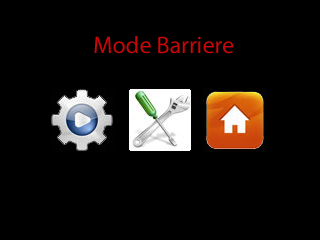
<style>
.page{position:relative;width:320px;height:240px;background:#000000}
.page>*{position:absolute;margin:0}
.t1{font:24px "MyriadPro-Regular";color:#ca0606}
</style>
<div class="page">
<p class="t1" style="left:94px;top:36px;width:140px;height:18px">Mode Barriere</p>
</div>
